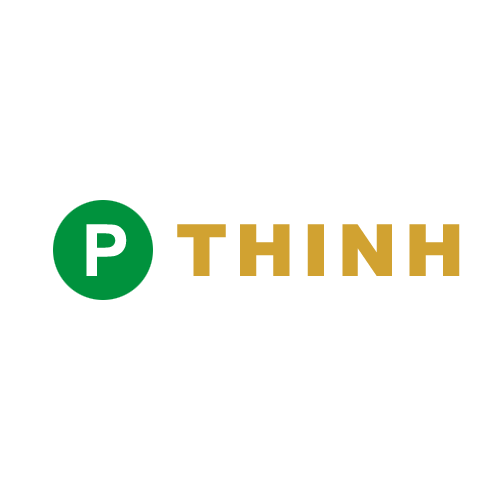
<style>
.page{position:relative;width:500px;height:500px;background:#ffffff}
.page>*{position:absolute;margin:0}
.t1{font:72px "Arial-BoldMT";letter-spacing:0.1em;color:#ffffff;text-transform:uppercase}
.t2{font:72px "Arial-Black";letter-spacing:0.1em;color:#d1a231;text-transform:uppercase}
</style>
<div class="page">
<p class="t1" style="left:86px;top:224px;width:41px;height:52px">p</p>
<p class="t2" style="left:177px;top:224px;width:283px;height:52px">THINH</p>
</div>
